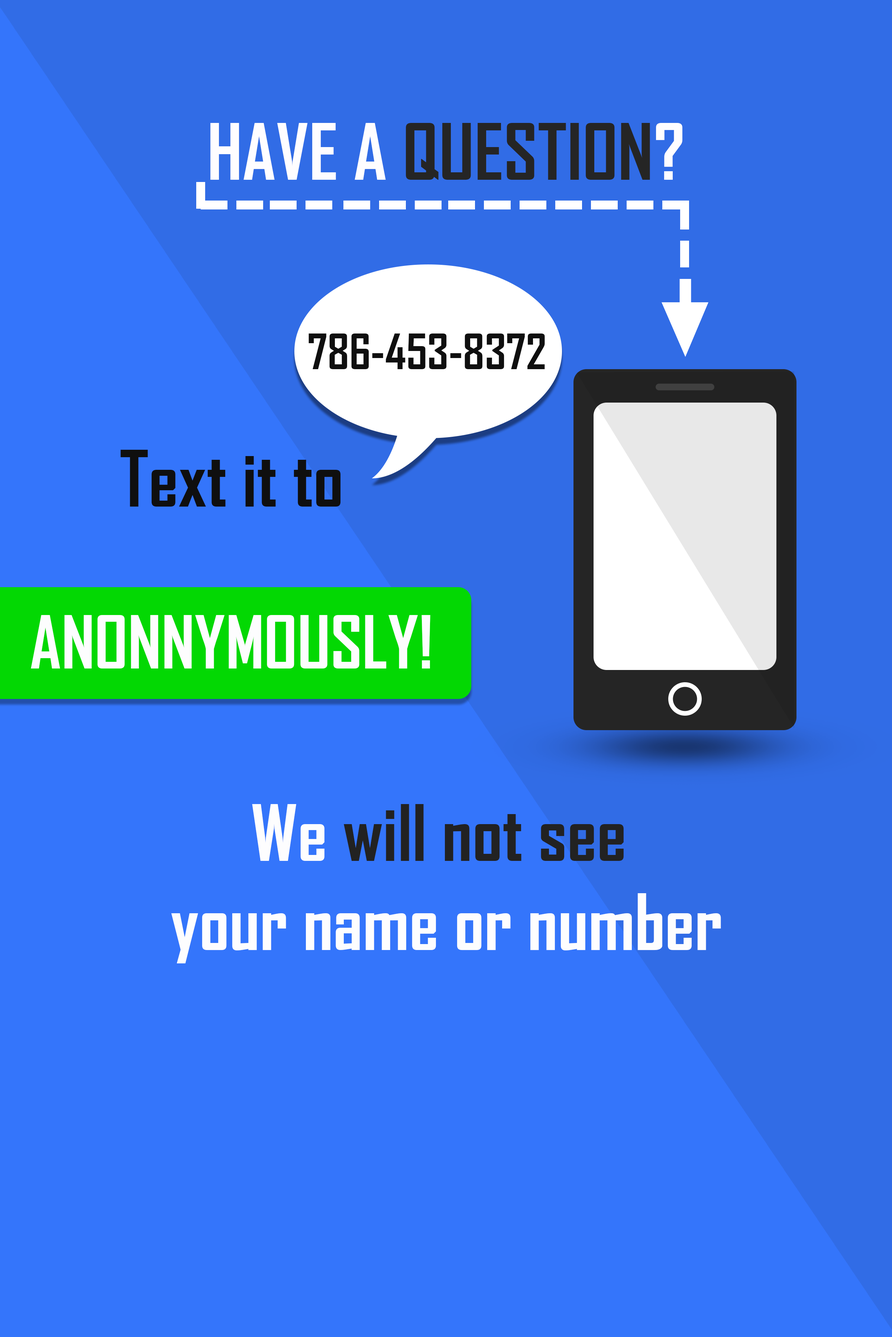
<style>
.page{position:relative;width:892px;height:1337px;background:#3475fb}
.page>*{position:absolute;margin:0}
.t1{font:74.3px "AgencyFB-Bold";color:#252525}
.t2{font:74.3px "AgencyFB-Bold";color:#fefdff}
.t3{font:46.4px "AgencyFB-Bold";color:#0f0f0f}
.t4{font:74.3px "AgencyFB-Bold";color:#0f0f0f}
.t5{font:69.7px "AgencyFB-Bold";color:#fdfdfe}
.t6{font:74.3px "AgencyFB-Bold";color:#fdfdfe}
.t7{font:74.3px "AgencyFB-Bold";color:#222222}
</style>
<div class="page">
<p class="t1" style="left:210px;top:123px;width:472px;height:57px"><span class="t2">HAVE A </span>QUESTION<span class="t2">?</span></p>
<p class="t3" style="left:308px;top:334px;width:237px;height:35px">786-453-8372</p>
<p class="t4" style="left:120px;top:450px;width:221px;height:57px">Text it to</p>
<p class="t5" style="left:31px;top:615px;width:399px;height:54px">ANONNYMOUSLY!</p>
<p class="t6" style="left:171px;top:804px;width:550px;height:160px;text-align:center">We <span class="t7">will not see</span> <br>your name or number</p>
</div>
